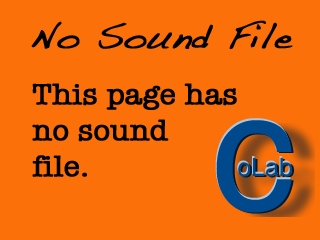
<style>
.page{position:relative;width:320px;height:240px;background:#fc7009}
.page>*{position:absolute;margin:0}
.t1{font:36px "Handwriting-Dakota";color:#000000;font-weight:bold}
.t2{font:30px "AmericanTypewriter";color:#000000;font-weight:bold}
</style>
<div class="page">
<p class="t1" style="left:31px;top:20px;width:262px;height:29px">No Sound File</p>
<p class="t2" style="left:32px;top:83px;width:205px;height:94px">This page has<br>no sound<br>file.</p>
</div>
